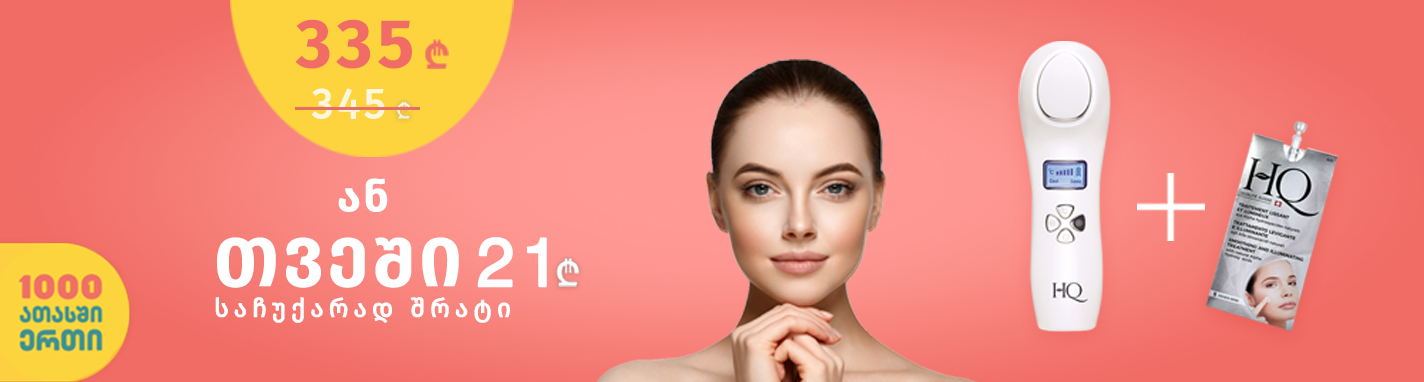
<style>
.page{position:relative;width:1424px;height:382px}
.page>*{position:absolute;margin:0}
.t1{font:68.3px "FiraGO-Bold";letter-spacing:0.075em;color:#f06c65}
.t2{font:42.7px "FiraGO-Regular";letter-spacing:0.075em;color:#fff6de;font-weight:bold}
.t3{font:42.7px "FiraGO-Bold";letter-spacing:0.075em;color:#ffffff}
.t4{font:25.6px "FiraGO-Regular";letter-spacing:0.17em;color:#ffffff;font-weight:bold}
.t5{font:68.3px "FiraGO-Bold";letter-spacing:0.075em;color:#ffffff}
.t6{font:68.3px "Helvetica";letter-spacing:0.075em;color:#ffffff;font-weight:bold}
</style>
<div class="page">
<p class="t1" style="left:295px;top:19px;width:117px;height:50px">335</p>
<p class="t2" style="left:311px;top:88px;width:74px;height:31px">345</p>
<p class="t3" style="left:338px;top:178px;width:50px;height:34px">ან</p>
<p class="t4" style="left:215px;top:237px;width:332px;height:86px"><span class="t5">თვეში </span><span class="t6">21<br></span>საჩუქარად შრატი</p>
</div>
